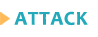
<style>
.page{position:relative;width:98px;height:37px;background:#ffffff}
.page>*{position:absolute;margin:0}
.t1{font:20px "Candara-Bold";letter-spacing:0.04em;color:#22aabb}
</style>
<div class="page">
<p class="t1" style="left:14px;top:11px;width:74px;height:15px">ATTACK</p>
</div>
